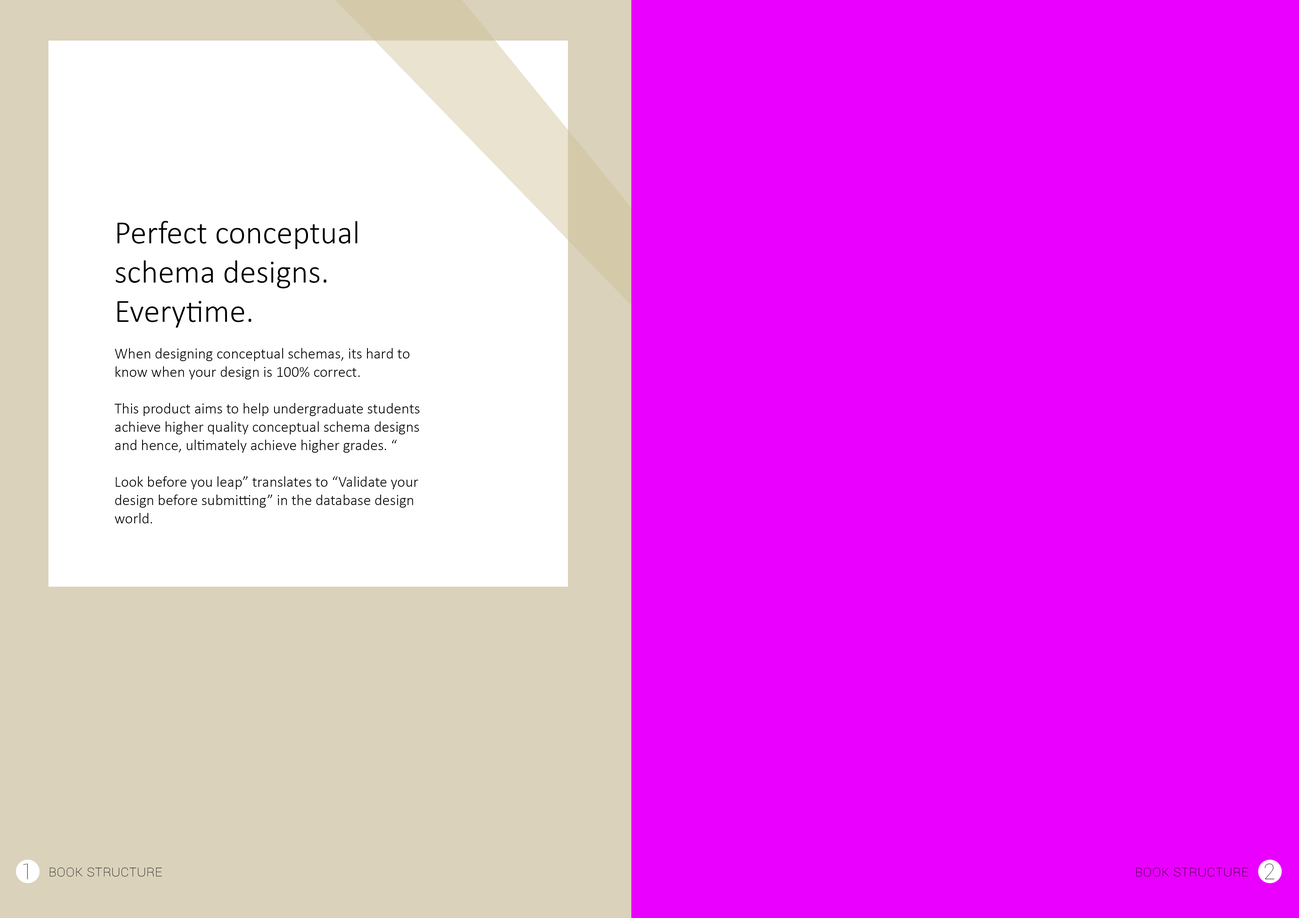
<style>
.page{position:relative;width:1299px;height:918px;background:#ea00ff}
.page>*{position:absolute;margin:0}
.t1{font:15.3px "Calibri-Light";color:#000000}
.t2{font:32.7px "Calibri-Light";color:#000000}
.t3{font:21.8px "Roboto-Thin";color:#484848}
.t4{font:15.3px "Roboto-Thin";color:#000000;font-variant:small-caps}
</style>
<div class="page">
<p class="t1" style="left:114px;top:221px;width:305px;height:303px"><span class="t2">Perfect conceptual schema designs. Everytime.<br></span><br>When designing conceptual schemas, its hard to know when your design is 100% correct. <br><br>This product aims to help undergraduate students achieve higher quality conceptual schema designs and hence, ultimately achieve higher grades. “<br><br>Look before you leap” translates to “Validate your design before submitting” in the database design world.</p>
<p class="t3" style="left:23px;top:864px;width:5px;height:16px">1</p>
<p class="t4" style="left:50px;top:868px;width:112px;height:9px">Book structure</p>
<p class="t4" style="left:1136px;top:868px;width:112px;height:9px">Book structure</p>
<p class="t3" style="left:1264px;top:864px;width:10px;height:16px">2</p>
</div>
